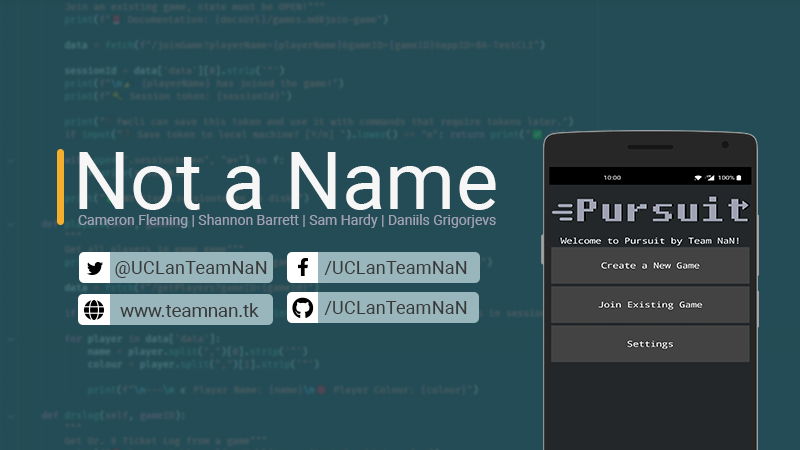
<style>
.page{position:relative;width:800px;height:450px;background:#234c56}
.page>*{position:absolute;margin:0}
.t1{font:80px "Roboto-Regular";color:#f6f6f6}
.t2{font:14px "Roboto-Regular";color:#9fa2b2}
.t3{font:18.5px "Roboto-Regular";color:#393939}
.t4{font:18.4px "Roboto-Regular";color:#393939}
.t5{font:18.3px "Roboto-Regular";color:#393939}
</style>
<div class="page">
<p class="t1" style="left:79px;top:152px;width:417px;height:58px">Not a Name</p>
<p class="t2" style="left:78px;top:214px;width:418px;height:14px">Cameron Fleming | Shannon Barrett | Sam Hardy | Daniils Grigorjevs</p>
<p class="t3" style="left:115px;top:261px;width:152px;height:17px">@UCLanTeamNaN</p>
<p class="t4" style="left:324px;top:261px;width:143px;height:14px">/UCLanTeamNaN</p>
<p class="t3" style="left:120px;top:303px;width:139px;height:14px">www.teamnan.tk</p>
<p class="t5" style="left:324px;top:301px;width:143px;height:14px">/UCLanTeamNaN</p>
</div>
